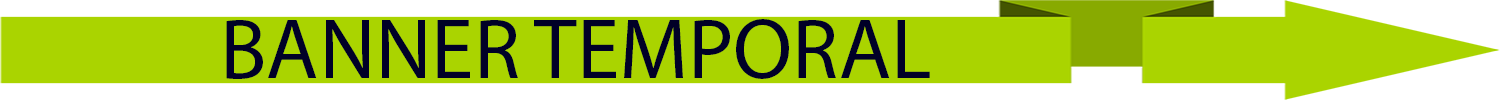
<style>
.page{position:relative;width:1500px;height:100px;background:#aad400}
.page>*{position:absolute;margin:0}
.t1{font:85.6px "MyriadPro-Regular";color:#000027}
</style>
<div class="page">
<p class="t1" style="left:226px;top:19px;width:704px;height:60px">BANNER TEMPORAL</p>
</div>
